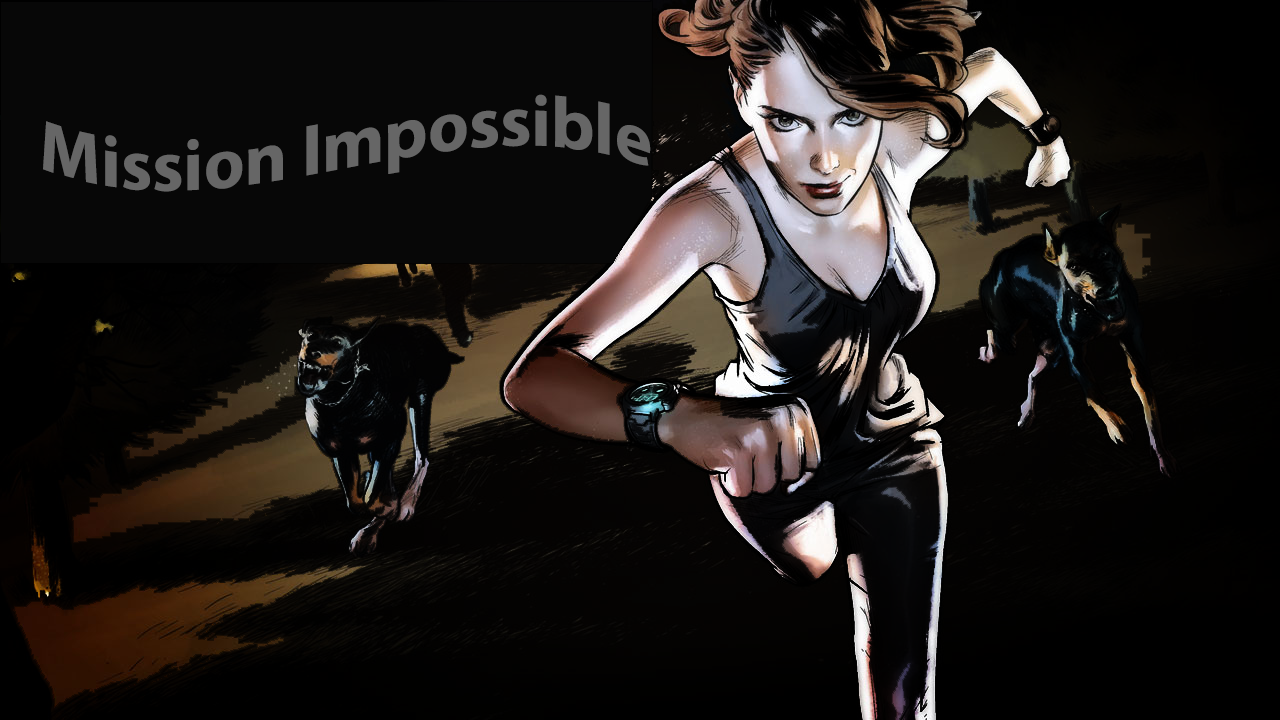
<style>
.page{position:relative;width:1280px;height:720px}
.page>*{position:absolute;margin:0}
.t1{font:72px "MyriadPro-Bold";color:#666666}
</style>
<div class="page">
<p class="t1" style="left:43px;top:94px;width:608px;height:98px">Mission Impossible</p>
</div>
